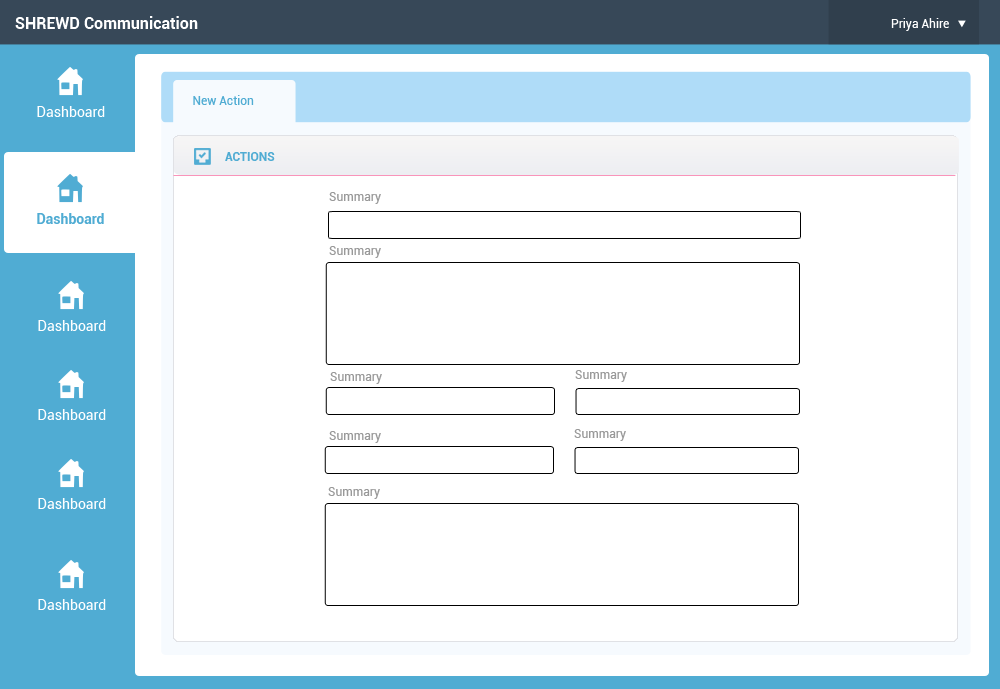
<style>
.page{position:relative;width:1000px;height:689px;background:#ffffff}
.page>*{position:absolute;margin:0}
.t1{font:16px "Roboto-Bold";color:#ffffff}
.t2{font:12px "Roboto-Regular";color:#ffffff}
.t3{font:12px "Roboto-Regular";color:#50acd3}
.t4{font:14px "Roboto-Regular";color:#ffffff}
.t5{font:12px "Roboto-Bold";color:#50acd3}
.t6{font:12px "Roboto-Regular";color:#999999}
</style>
<div class="page">
<p class="t1" style="left:15px;top:16px;width:183px;height:13px">SHREWD Communication</p>
<p class="t2" style="left:891px;top:18px;width:58px;height:13px">Priya Ahire</p>
<p class="t3" style="left:193px;top:95px;width:61px;height:10px">New Action</p>
<p class="t4" style="left:37px;top:106px;width:68px;height:11px">Dashboard</p>
<p class="t5" style="left:225px;top:152px;width:50px;height:9px">ACTIONS</p>
<p class="t6" style="left:329px;top:192px;width:52px;height:12px">Summary</p>
<p class="t6" style="left:329px;top:246px;width:52px;height:12px">Summary</p>
<p class="t4" style="left:38px;top:320px;width:68px;height:11px">Dashboard</p>
<p class="t6" style="left:330px;top:372px;width:52px;height:12px">Summary</p>
<p class="t6" style="left:575px;top:370px;width:52px;height:12px">Summary</p>
<p class="t4" style="left:38px;top:409px;width:68px;height:11px">Dashboard</p>
<p class="t6" style="left:329px;top:431px;width:52px;height:12px">Summary</p>
<p class="t6" style="left:574px;top:429px;width:52px;height:12px">Summary</p>
<p class="t6" style="left:328px;top:487px;width:52px;height:12px">Summary</p>
<p class="t4" style="left:38px;top:498px;width:68px;height:11px">Dashboard</p>
<p class="t4" style="left:38px;top:599px;width:68px;height:11px">Dashboard</p>
</div>
